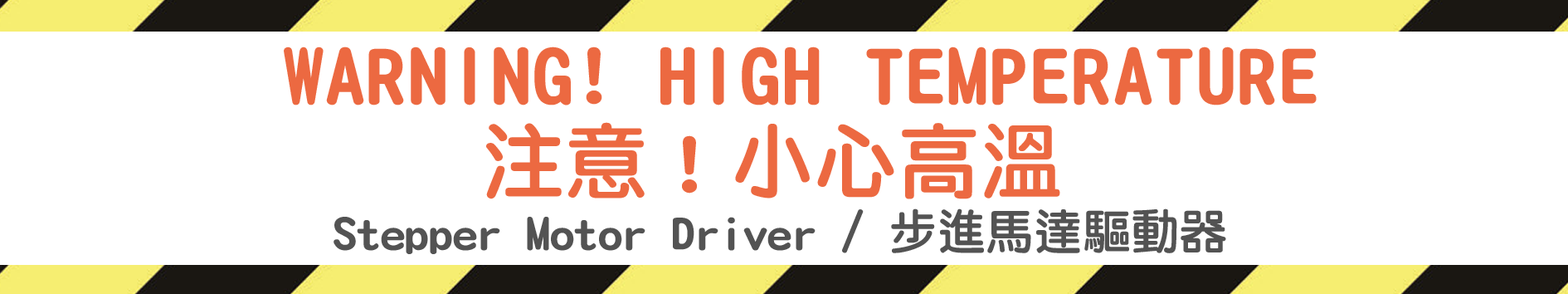
<style>
.page{position:relative;width:1568px;height:294px;background:#ffffff}
.page>*{position:absolute;margin:0}
.t1{font:83px "DFYuan-W8-WIN-BF";color:#ec6941}
.t2{font:48.4px "DFYuan-W8-WIN-BF";color:#535353}
</style>
<div class="page">
<p class="t1" style="left:284px;top:46px;width:1033px;height:59px">WARNING! HIGH TEMPERATURE</p>
<p class="t1" style="left:486px;top:122px;width:574px;height:77px">注意！小心高溫</p>
<p class="t2" style="left:334px;top:208px;width:892px;height:46px">Stepper Motor Driver / 步進馬達驅動器</p>
</div>
